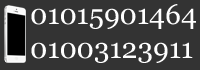
<style>
.page{position:relative;width:200px;height:70px;background:#333333}
.page>*{position:absolute;margin:0}
.t1{font:28.3px "Vani";color:#ffffff}
</style>
<div class="page">
<p class="t1" style="left:31px;top:4px;width:165px;height:59px">01015901464<br>01003123911</p>
</div>
